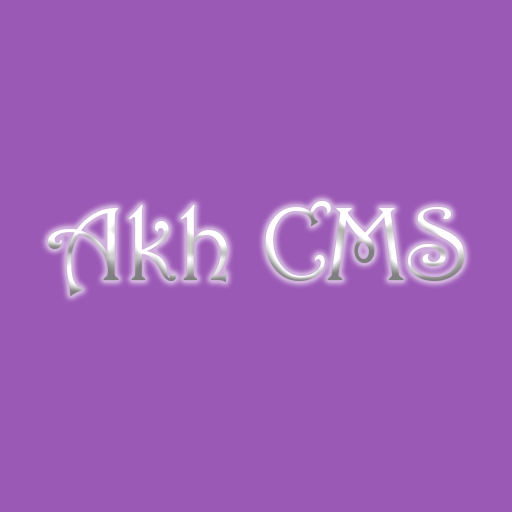
<style>
.page{position:relative;width:512px;height:512px;background:#9b59b6}
.page>*{position:absolute;margin:0}
.t1{font:106px "Harrington"}
</style>
<div class="page">
<p class="t1" style="left:47px;top:201px;width:418px;height:95px">Akh CMS</p>
</div>
